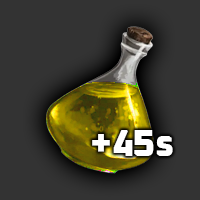
<style>
.page{position:relative;width:200px;height:200px;background:#333333}
.page>*{position:absolute;margin:0}
.t1{font:37.5px "Oxanium-ExtraBold";color:#ffffff}
</style>
<div class="page">
<p class="t1" style="left:92px;top:130px;width:81px;height:26px">+45s</p>
</div>
